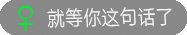
<style>
.page{position:relative;width:187px;height:35px;background:#888888}
.page>*{position:absolute;margin:0}
.t1{font:39.5px "ç»å¸ç»é¶ä¹¦ç®-regular";color:#0ce535;scale:1.1 1}
.t2{font:22.2px "HYQiHeiY1-CEW";color:#ffffff;scale:0.82 1}
</style>
<div class="page">
<p class="t1" style="left:18px;top:5px;width:16px;height:26px">♀</p>
<p class="t2" style="left:47px;top:7px;width:125px;height:21px;rotate:-1deg">就等你这句话了</p>
</div>
